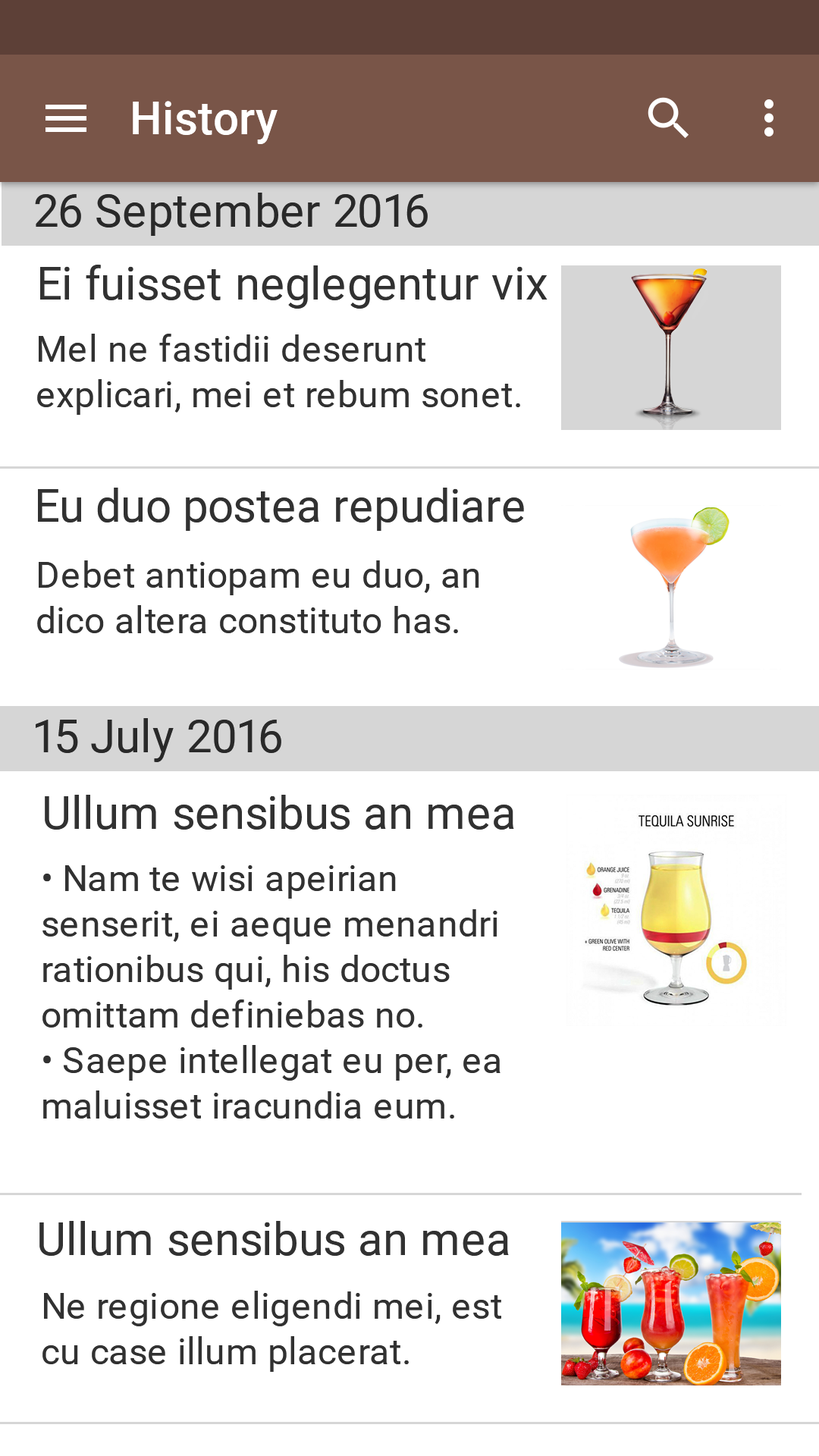
<style>
.page{position:relative;width:819px;height:1456px;background:#ffffff}
.page>*{position:absolute;margin:0}
.t1{font:45.5px "Roboto-Medium";letter-spacing:0.005em;color:#ffffff}
.t2{font:45.5px "Roboto-Regular";letter-spacing:0.005em;color:#292929}
.t3{font:45.5px "Roboto-Regular";letter-spacing:0.005em;color:#313131}
.t4{font:36.4px/45.5px "Roboto-Regular";letter-spacing:0.01em;color:#313131}
</style>
<div class="page">
<p class="t1" style="left:133px;top:101px;width:145px;height:43px">History</p>
<p class="t2" style="left:35px;top:193px;width:393px;height:43px">26 September 2016</p>
<p class="t3" style="left:40px;top:265px;width:508px;height:44px">Ei fuisset neglegentur vix</p>
<p class="t4" style="left:37px;top:334px;width:483px;height:81px">Mel ne fastidii deserunt explicari, mei et rebum sonet.</p>
<p class="t3" style="left:38px;top:488px;width:486px;height:43px">Eu duo postea repudiare</p>
<p class="t4" style="left:37px;top:560px;width:442px;height:73px">Debet antiopam eu duo, an dico altera constituto has.</p>
<p class="t2" style="left:36px;top:718px;width:245px;height:44px">15 July 2016</p>
<p class="t3" style="left:45px;top:795px;width:469px;height:35px">Ullum sensibus an mea</p>
<p class="t4" style="left:42px;top:865px;width:458px;height:254px">• Nam te wisi apeirian senserit, ei aeque menandri rationibus qui, his doctus omittam definiebas no. <br>• Saepe intellegat eu per, ea maluisset iracundia eum.</p>
<p class="t3" style="left:39px;top:1221px;width:470px;height:35px">Ullum sensibus an mea</p>
<p class="t4" style="left:42px;top:1291px;width:459px;height:81px">Ne regione eligendi mei, est cu case illum placerat.</p>
</div>
